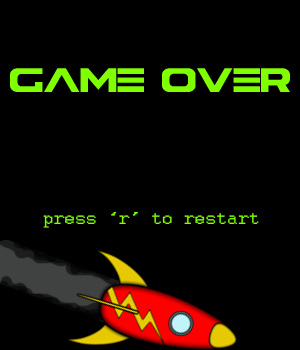
<style>
.page{position:relative;width:300px;height:350px;background:#000000}
.page>*{position:absolute;margin:0}
.t1{font:28.1px "Astera";color:#7fff00}
.t2{font:19.3px "Courier";color:#7fff00}
</style>
<div class="page">
<p class="t1" style="left:10px;top:68px;width:280px;height:24px">Game over</p>
<p class="t2" style="left:43px;top:212px;width:216px;height:16px">press ‘r’ to restart</p>
</div>
